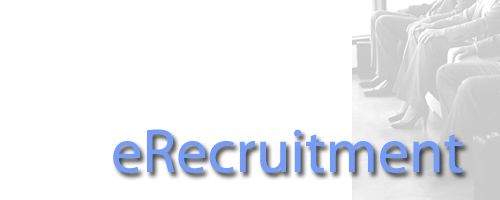
<style>
.page{position:relative;width:500px;height:200px;background:#ffffff}
.page>*{position:absolute;margin:0}
.t1{font:62.5px "MyriadPro-Regular";color:#759df7}
</style>
<div class="page">
<p class="t1" style="left:113px;top:129px;width:350px;height:44px">eRecruitment</p>
</div>
